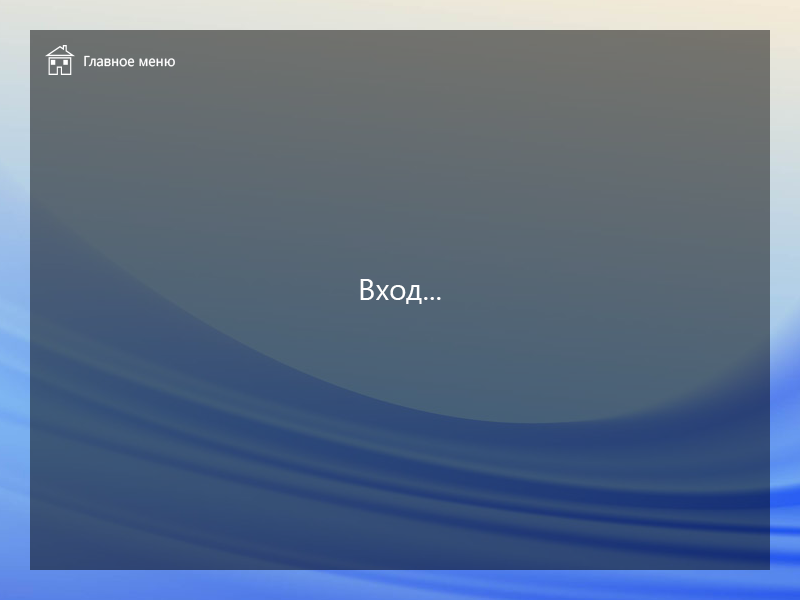
<style>
.page{position:relative;width:800px;height:600px}
.page>*{position:absolute;margin:0}
.t1{font:14.2px "SegoeUI";color:#ffffff}
.t2{font:30px "SegoeUI";color:#ffffff}
</style>
<div class="page">
<p class="t1" style="left:84px;top:55px;width:91px;height:12px">Главное меню</p>
<p class="t2" style="left:360px;top:279px;width:81px;height:25px">Вход...</p>
</div>
